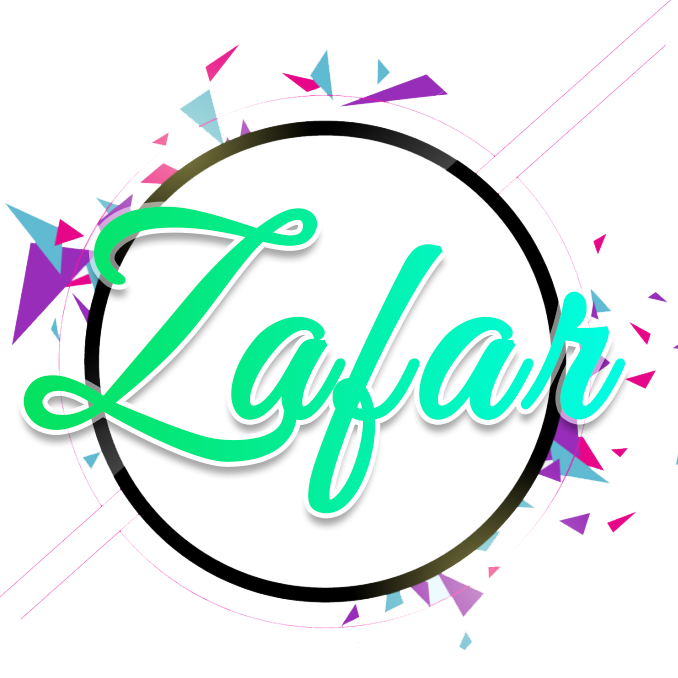
<style>
.page{position:relative;width:678px;height:678px;background:#ffffff}
.page>*{position:absolute;margin:0}
.t1{font:268.5px "GreatVibes-Regular";letter-spacing:0.05em;font-weight:bold}
</style>
<div class="page">
<p class="t1" style="left:23px;top:206px;width:603px;height:308px">Zafar</p>
</div>
